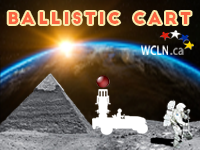
<style>
.page{position:relative;width:200px;height:150px}
.page>*{position:absolute;margin:0}
.t1{font:16.1px "BigJohn";letter-spacing:0.18em;color:#fb6542}
</style>
<div class="page">
<p class="t1" style="left:8px;top:12px;width:183px;height:12px">Ballistic cart</p>
</div>
